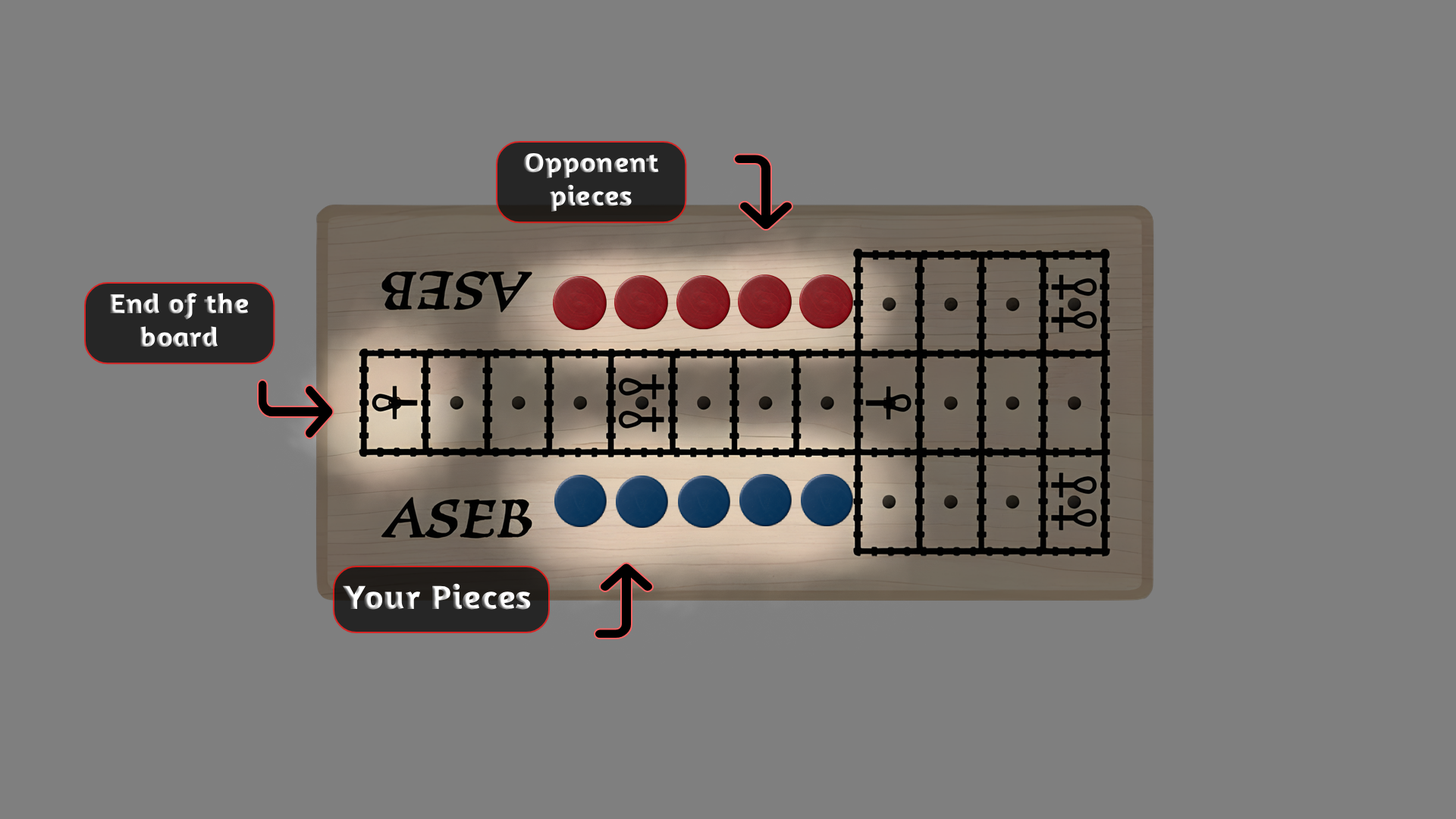
<style>
.page{position:relative;width:1456px;height:819px;background:#7f7f7f}
.page>*{position:absolute;margin:0}
.t1{font:27.7px "Amaranth-Bold";scale:1.14 1}
.t2{font:33.8px "Amaranth-Bold";scale:1.14 1}
</style>
<div class="page">
<p class="t1" style="left:523px;top:153px;width:136px;height:59px;text-align:center">Opponent<br>pieces</p>
<p class="t1" style="left:110px;top:293px;width:139px;height:54px;text-align:center">End of the<br>board</p>
<p class="t2" style="left:343px;top:583px;width:188px;height:27px">Your Pieces</p>
</div>
